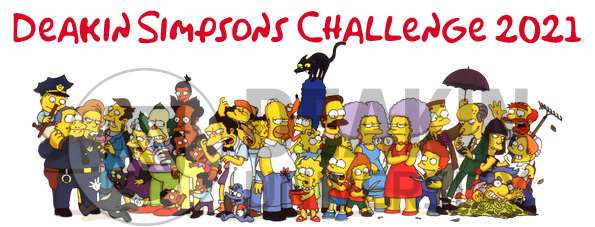
<style>
.page{position:relative;width:595px;height:227px;background:#ffffff}
.page>*{position:absolute;margin:0}
.t1{font:36px "Simpsonfont";color:#d80825}
</style>
<div class="page">
<p class="t1" style="left:13px;top:10px;width:568px;height:34px">Deakin Simpsons Challenge 2021</p>
</div>
